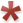
<style>
.page{position:relative;width:23px;height:23px;background:#ffffff}
.page>*{position:absolute;margin:0}
.t1{font:59px "Arial-BoldMT";letter-spacing:0.04em;color:#a6392e}
</style>
<div class="page">
<p class="t1" style="left:0px;top:1px;width:21px;height:20px">*</p>
</div>
